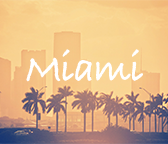
<style>
.page{position:relative;width:168px;height:144px}
.page>*{position:absolute;margin:0}
.t1{font:42.9px "BradleyHandITCTT-Bold";letter-spacing:-0.025em;color:#ffffff;scale:0.97 1}
</style>
<div class="page">
<p class="t1" style="left:26px;top:49px;width:117px;height:33px">Miami</p>
</div>
